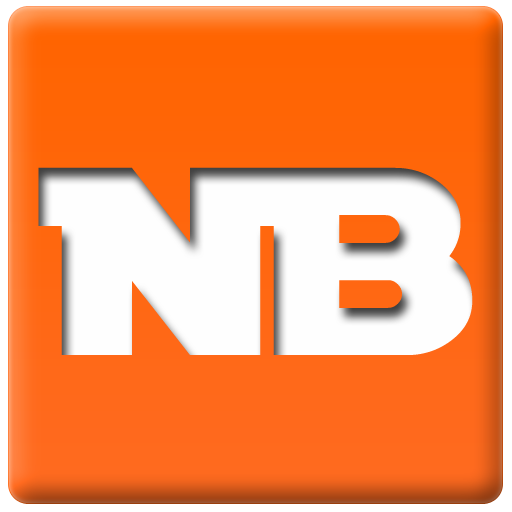
<style>
.page{position:relative;width:512px;height:512px}
.page>*{position:absolute;margin:0}
.t1{font:280px "SFDistantGalaxyAlternate";letter-spacing:0.005em;color:#fefefe}
</style>
<div class="page">
<p class="t1" style="left:38px;top:167px;width:435px;height:188px">NB</p>
</div>
